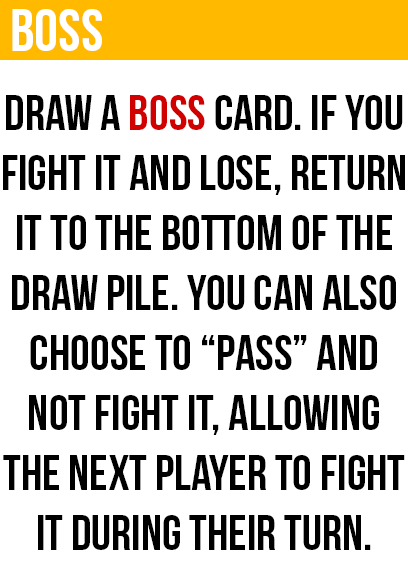
<style>
.page{position:relative;width:408px;height:585px;background:#ffffff}
.page>*{position:absolute;margin:0}
.t1{font:60px "BebasNeue";color:#ffffff}
.t2{font:50px "BebasNeue";color:#000000}
.t3{font:50px "BebasNeue";color:#d20101}
</style>
<div class="page">
<p class="t1" style="left:12px;top:9px;width:90px;height:42px">boss</p>
<p class="t2" style="left:3px;top:95px;width:402px;height:455px;text-align:center">draw a <span class="t3">boss</span> card. if you<br>fight it and lose, return<br>it to the bottom of the<br>draw pile. you can also<br>choose to “pass” and<br>not fight it, allowing<br>the next player to fight<br>it during their turn.</p>
</div>
